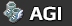
<style>
.page{position:relative;width:72px;height:26px;background:#333333}
.page>*{position:absolute;margin:0}
.t1{font:20px "Play-Bold";color:#ffffff}
</style>
<div class="page">
<p class="t1" style="left:29px;top:6px;width:32px;height:15px">AGI</p>
</div>
